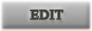
<style>
.page{position:relative;width:92px;height:31px}
.page>*{position:absolute;margin:0}
.t1{font:17px "Aparajita";color:#3c3b3a;font-weight:bold}
</style>
<div class="page">
<p class="t1" style="left:30px;top:10px;width:34px;height:10px">EDIT</p>
</div>
